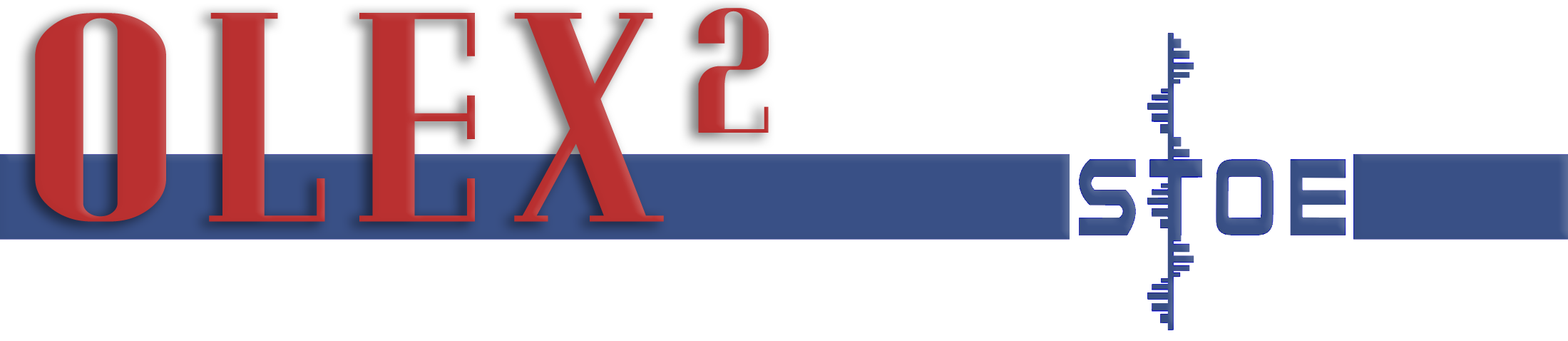
<style>
.page{position:relative;width:1568px;height:341px;background:#ffffff}
.page>*{position:absolute;margin:0}
.t1{font:260.4px "PotteryBarn";letter-spacing:0.05em;color:#bb3030;scale:1.31 1}
.t2{font:266.7px "PotteryBarn";letter-spacing:0.05em;color:#bb3030;scale:1.17 1}
</style>
<div class="page">
<p class="t1" style="left:35px;top:8px;width:734px;height:214px">OLEX<span class="t2">2</span></p>
</div>
